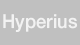
<style>
.page{position:relative;width:80px;height:45px;background:#c0c0c0}
.page>*{position:absolute;margin:0}
.t1{font:19.2px "HelveticaNeue-Medium";color:#f2f2f2;scale:0.96 1}
</style>
<div class="page">
<p class="t1" style="left:3px;top:14px;width:75px;height:18px">Hyperiust</p>
</div>
